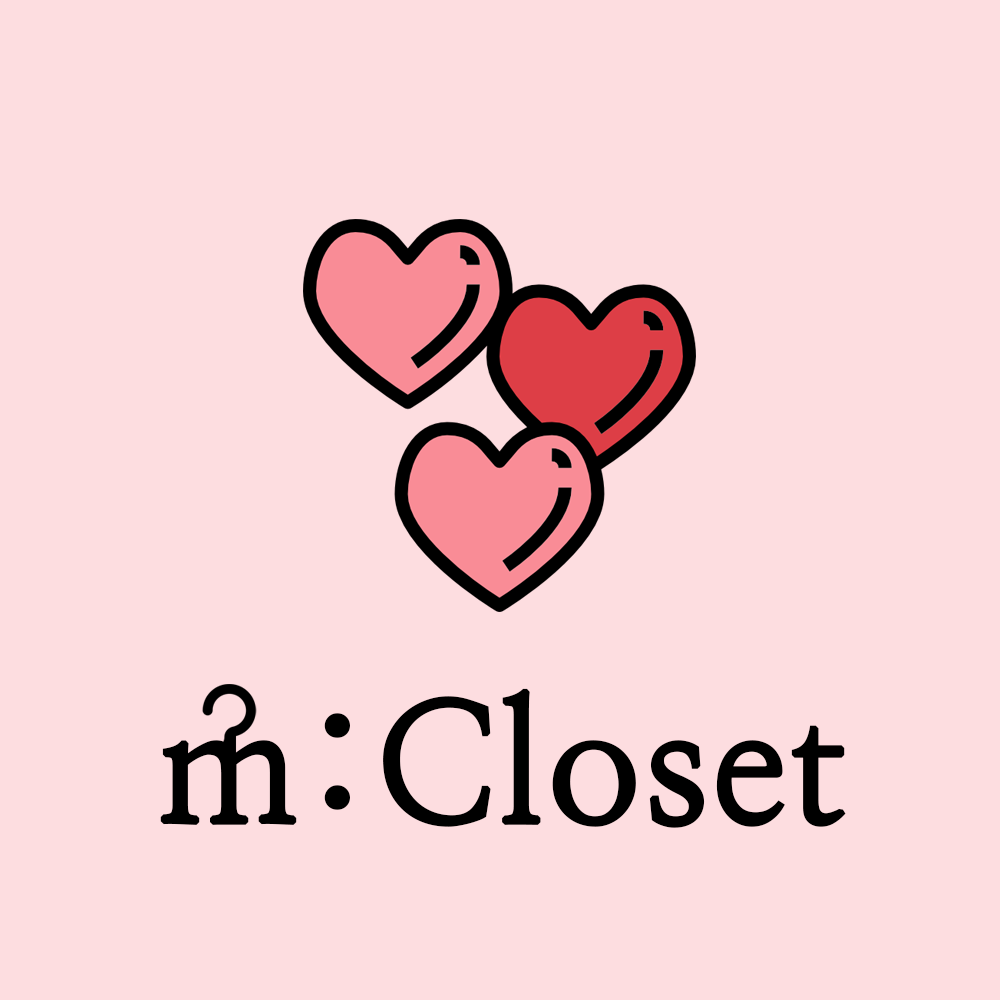
<style>
.page{position:relative;width:1000px;height:1000px;background:#fddde0}
.page>*{position:absolute;margin:0}
.t1{font:164.9px "NanumMyeongjo";color:#000000;font-weight:bold}
</style>
<div class="page">
<p class="t1" style="left:160px;top:688px;width:686px;height:140px">m:Closet</p>
</div>
